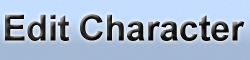
<style>
.page{position:relative;width:250px;height:60px}
.page>*{position:absolute;margin:0}
.t1{font:36px "Arial-BoldMT";letter-spacing:-0.01em}
</style>
<div class="page">
<p class="t1" style="left:5px;top:14px;width:240px;height:27px">Edit Character</p>
</div>
